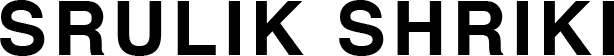
<style>
.page{position:relative;width:614px;height:56px;background:#ffffff}
.page>*{position:absolute;margin:0}
.t1{font:75px "Helvetica-Bold";letter-spacing:0.075em;color:#000000}
</style>
<div class="page">
<p class="t1" style="left:0px;top:0px;width:614px;height:56px">SRULIK SHRIKI</p>
</div>
